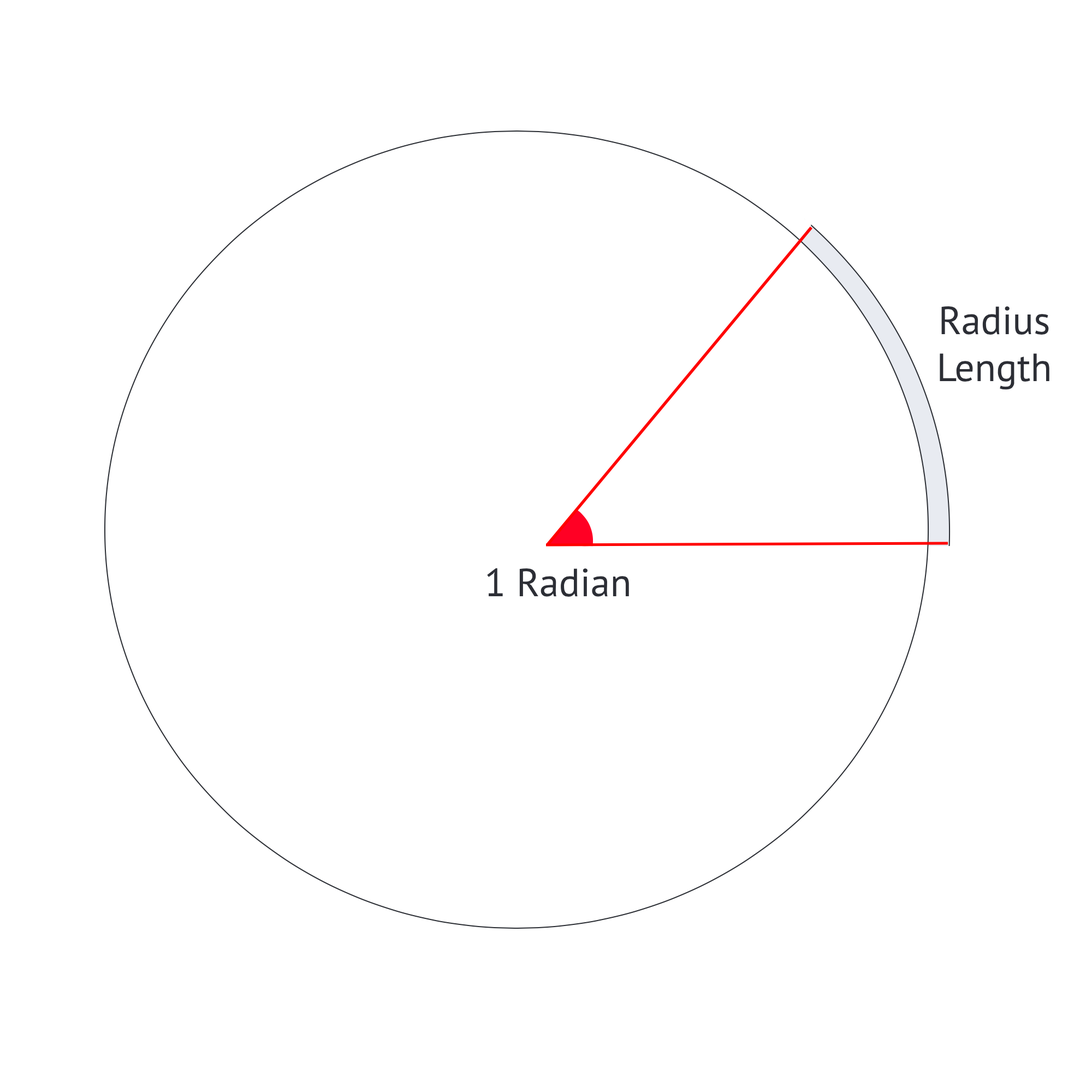
<style>
.page{position:relative;width:1092px;height:1092px;background:#ffffff}
.page>*{position:absolute;margin:0}
.t1{font:39.3px "MyriadPro-Regular";color:#2c2e35}
</style>
<div class="page">
<p class="t1" style="left:940px;top:306px;width:109px;height:84px;text-align:center">Radius<br>Length</p>
<p class="t1" style="left:487px;top:568px;width:142px;height:29px">1 Radian</p>
</div>
